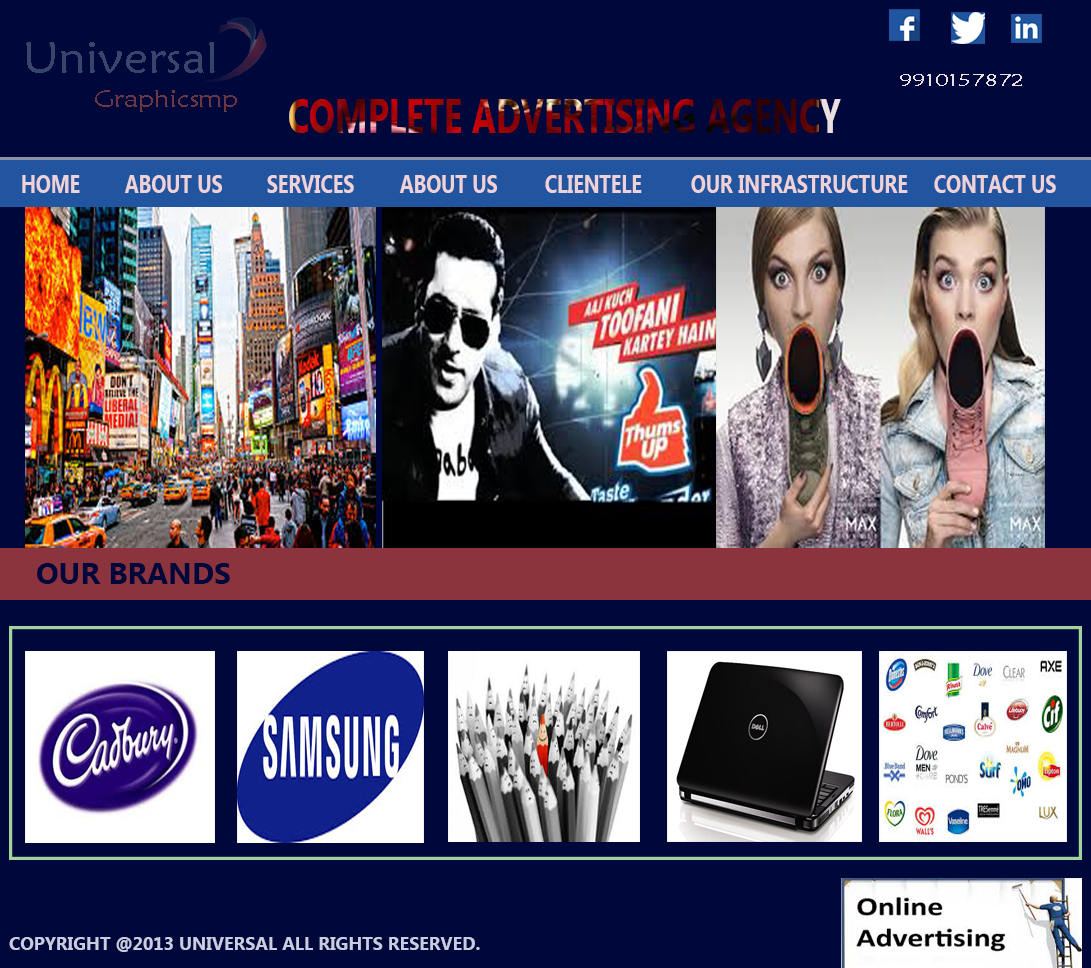
<style>
.page{position:relative;width:1091px;height:968px;background:#00073b}
.page>*{position:absolute;margin:0}
.t1{font:44.5px "MaiandraGD-Regular";color:#37456a;scale:1.09 1}
.t2{font:16.4px "MaiandraGD-Regular";color:#eadfe1;scale:1.4 1}
.t3{font:24px "MaiandraGD-Regular";color:#6a3742;scale:1.16 1}
.t4{font:48px "LaoUI-Bold";scale:0.71 1}
.t5{font:26.5px "LaoUI-Bold";color:#eed2d8;scale:0.74 1}
.t6{font:30px "LaoUI-Bold";color:#00073b}
.t7{font:18px "LaoUI-Bold";color:#cacde1}
</style>
<div class="page">
<p class="t1" style="left:26px;top:42px;width:189px;height:31px">Universal</p>
<p class="t2" style="left:900px;top:74px;width:122px;height:12px">9910157872</p>
<p class="t3" style="left:95px;top:90px;width:142px;height:22px">Graphicsmp</p>
<p class="t4" style="left:289px;top:99px;width:552px;height:34px">COMPLETE ADVERTISING AGENCY</p>
<p class="t5" style="left:22px;top:175px;width:58px;height:18px">HOME</p>
<p class="t5" style="left:124px;top:175px;width:98px;height:18px">ABOUT US</p>
<p class="t5" style="left:267px;top:175px;width:87px;height:18px">SERVICES</p>
<p class="t5" style="left:399px;top:175px;width:98px;height:18px">ABOUT US</p>
<p class="t5" style="left:545px;top:175px;width:97px;height:18px">CLIENTELE</p>
<p class="t5" style="left:691px;top:175px;width:217px;height:18px">OUR INFRASTRUCTURE</p>
<p class="t5" style="left:934px;top:175px;width:122px;height:18px">CONTACT US</p>
<p class="t6" style="left:37px;top:563px;width:193px;height:21px">OUR BRANDS</p>
<p class="t7" style="left:9px;top:937px;width:471px;height:15px">COPYRIGHT @2013 UNIVERSAL ALL RIGHTS RESERVED.</p>
</div>
